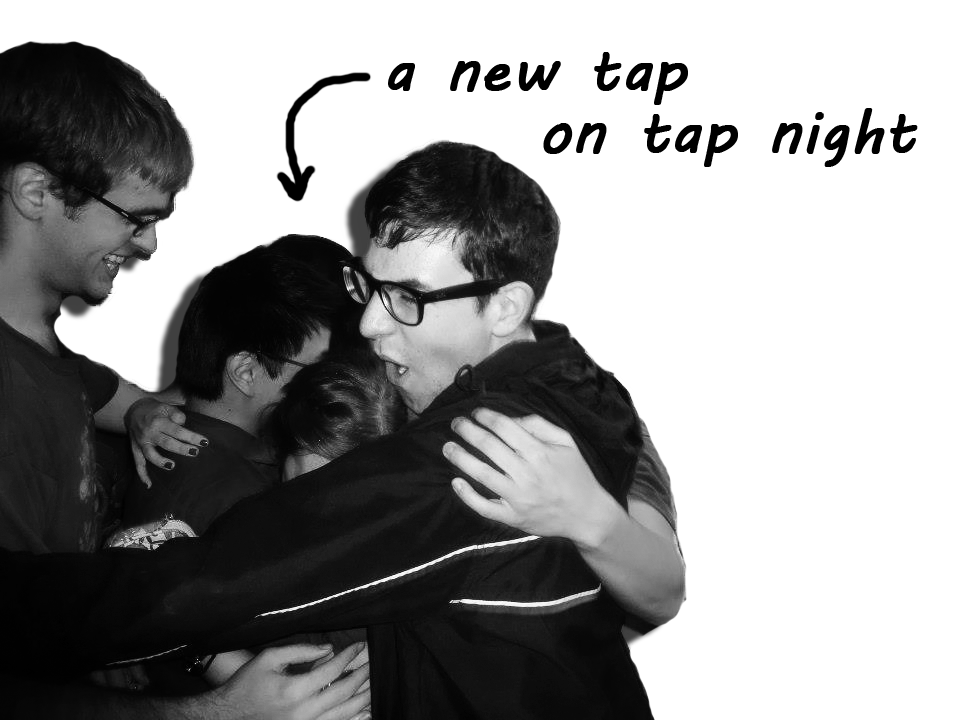
<style>
.page{position:relative;width:960px;height:720px;background:#ffffff}
.page>*{position:absolute;margin:0}
.t1{font:60px/62px "MVBoli";color:#000000;font-weight:bold}
.t2{font:60px/62px "SegoePrint";color:#3a4467}
</style>
<div class="page">
<p class="t1" style="left:388px;top:52px;width:530px;height:115px;text-align:justify"><span class="t2"><br></span>a new tap <br>     on tap night</p>
</div>
